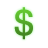
<style>
.page{position:relative;width:48px;height:48px;background:#ffffff}
.page>*{position:absolute;margin:0}
.t1{font:36px "Helvetica";font-weight:bold}
</style>
<div class="page">
<p class="t1" style="left:14px;top:7px;width:19px;height:33px">$</p>
</div>
